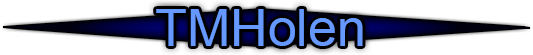
<style>
.page{position:relative;width:533px;height:55px;background:#ffffff}
.page>*{position:absolute;margin:0}
.t1{font:52px "ArialMT";color:#6699ff}
</style>
<div class="page">
<p class="t1" style="left:156px;top:9px;width:207px;height:37px">TMHolen</p>
</div>
